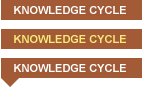
<style>
.page{position:relative;width:142px;height:87px;background:#ffffff}
.page>*{position:absolute;margin:0}
.t1{font:11px "Arial-BoldMT";color:#ffffff}
.t2{font:11px "Arial-BoldMT";color:#f8eb78}
</style>
<div class="page">
<p class="t1" style="left:14px;top:6px;width:112px;height:8px">KNOWLEDGE CYCLE</p>
<p class="t2" style="left:14px;top:35px;width:112px;height:8px">KNOWLEDGE CYCLE</p>
<p class="t1" style="left:14px;top:64px;width:112px;height:8px">KNOWLEDGE CYCLE</p>
</div>
